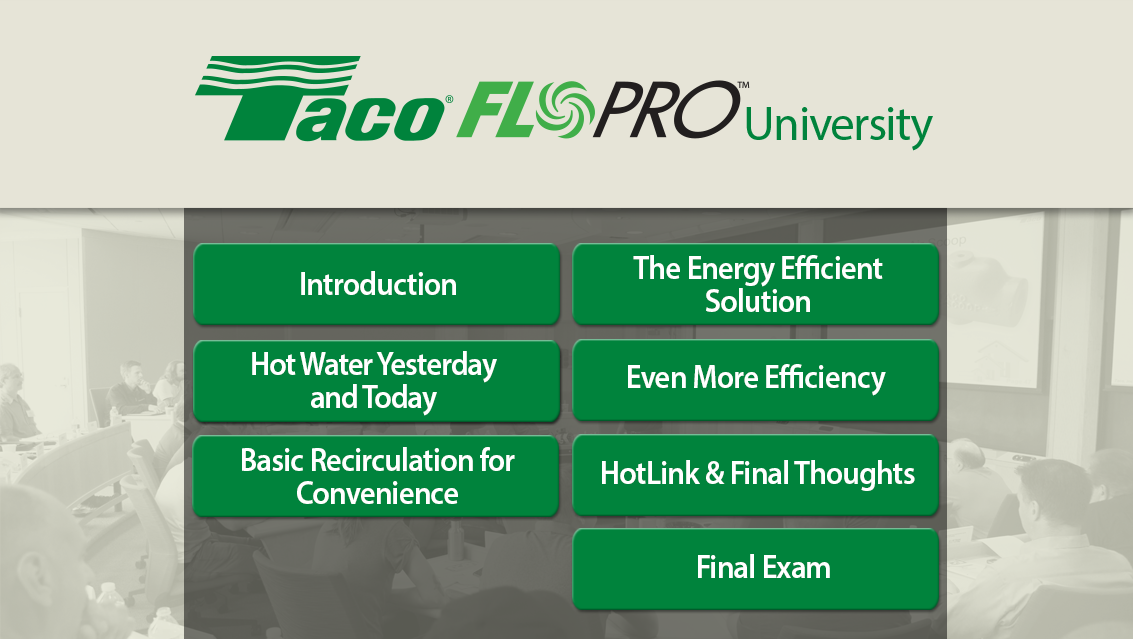
<style>
.page{position:relative;width:1133px;height:639px;background:#e6e4d7}
.page>*{position:absolute;margin:0}
.t1{font:33px/33px "MyriadPro-Semibold";letter-spacing:-0.02em;color:#ffffff;scale:0.92 1}
.t2{font:33px "MyriadPro-Semibold";letter-spacing:-0.02em;color:#ffffff;scale:0.92 1}
.t3{font:33px/33px "MyriadPro-Semibold";letter-spacing:-0.03em;color:#ffffff;scale:0.92 1}
</style>
<div class="page">
<p class="t1" style="left:633px;top:255px;width:250px;height:57px;text-align:center">The Energy Efficient<br>Solution</p>
<p class="t2" style="left:301px;top:271px;width:155px;height:24px">Introduction</p>
<p class="t3" style="left:252px;top:351px;width:245px;height:65px;text-align:center">Hot Water Yesterday <br>and Today</p>
<p class="t2" style="left:628px;top:364px;width:258px;height:32px">Even More Efficiency</p>
<p class="t1" style="left:242px;top:447px;width:273px;height:57px;text-align:center">Basic Recirculation for <br>Convenience</p>
<p class="t2" style="left:602px;top:460px;width:313px;height:31px">HotLink &amp; Final Thoughts</p>
<p class="t2" style="left:698px;top:554px;width:132px;height:24px">Final Exam</p>
</div>
